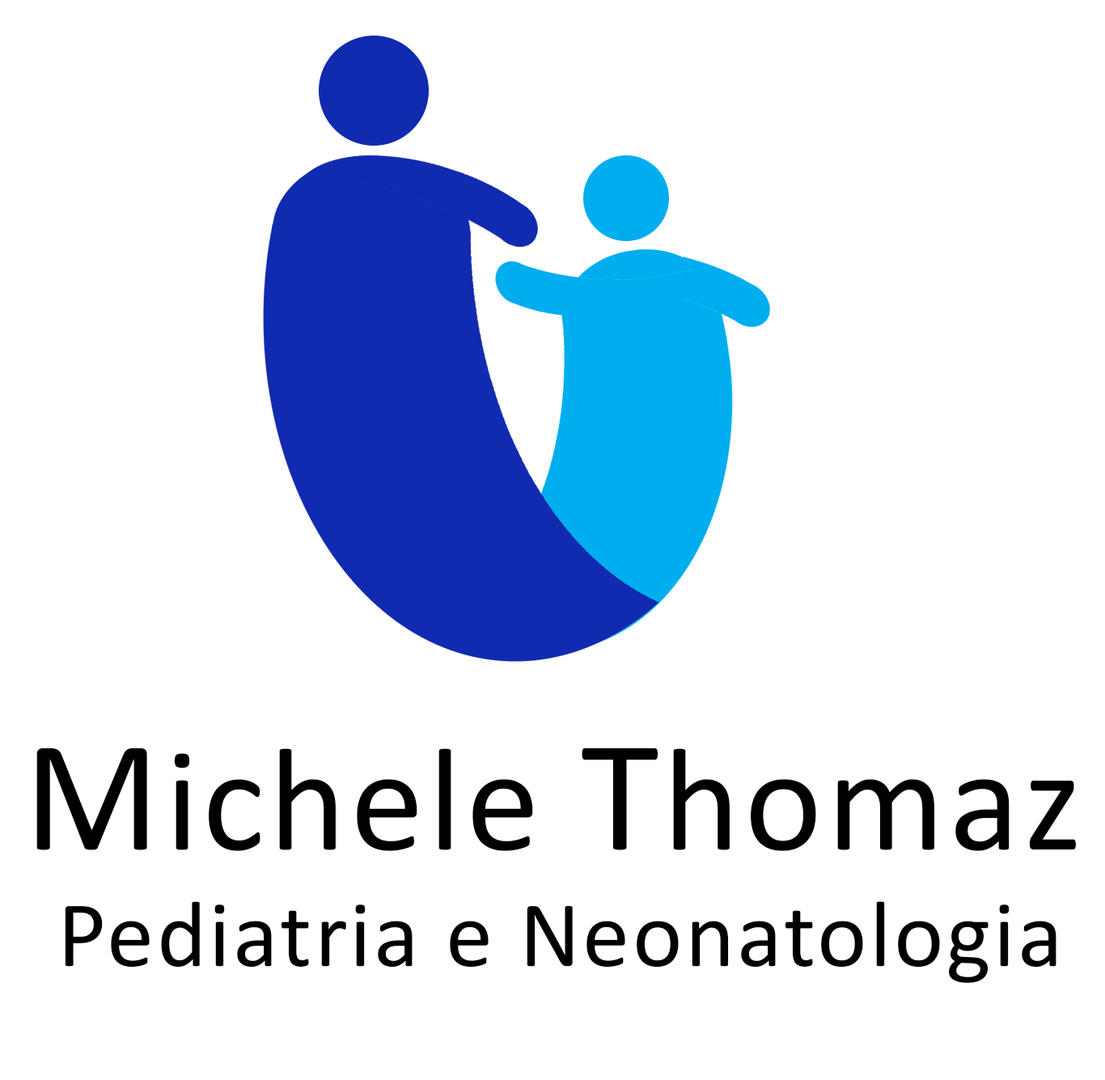
<style>
.page{position:relative;width:1105px;height:1080px;background:#ffffff}
.page>*{position:absolute;margin:0}
.t1{font:148.3px "Calibri";letter-spacing:0.025em;color:#000000}
.t2{font:160.4px "Calibri";letter-spacing:0.025em;color:#000000}
.t3{font:95px "Calibri";letter-spacing:0.025em;color:#000000}
</style>
<div class="page">
<p class="t1" style="left:36px;top:747px;width:1039px;height:104px"><span class="t2">M</span>ichele <span class="t2">T</span>homaz</p>
<p class="t3" style="left:65px;top:901px;width:991px;height:81px">Pediatria e Neonatologia</p>
</div>
